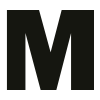
<style>
.page{position:relative;width:100px;height:100px;background:#151610}
.page>*{position:absolute;margin:0}
.t1{font:120px "FranklinGothic-Heavy";color:#151610}
</style>
<div class="page">
<p class="t1" style="left:6px;top:10px;width:88px;height:80px">M</p>
</div>
